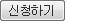
<style>
.page{position:relative;width:85px;height:21px;background:#ffffff}
.page>*{position:absolute;margin:0}
.t1{font:12px "Gulim";letter-spacing:-0.03em;color:#2c2c2c}
</style>
<div class="page">
<p class="t1" style="left:9px;top:5px;width:44px;height:11px">신청하기</p>
</div>
